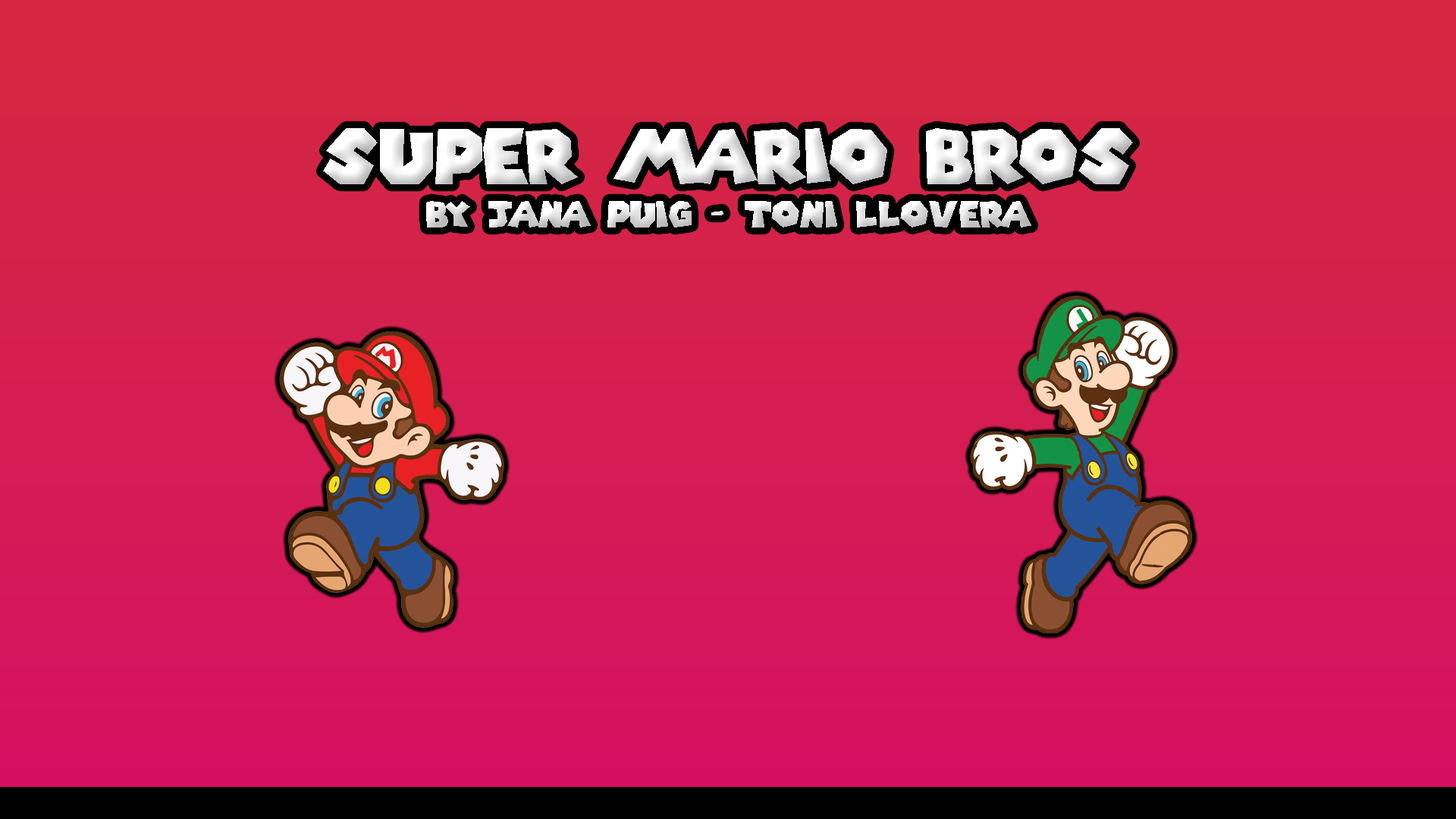
<style>
.page{position:relative;width:1456px;height:819px}
.page>*{position:absolute;margin:0}
.t1{font:35.9px "SuperMarioGalaxy";color:#ebebeb}
.t2{font:74.8px "SuperMarioGalaxy";color:#ebebeb}
</style>
<div class="page">
<p class="t1" style="left:323px;top:128px;width:810px;height:99px;text-align:center"><span class="t2">SUPER MARIO BROS<br></span>bY JANA PUIG - tONI lLOVERA</p>
</div>
